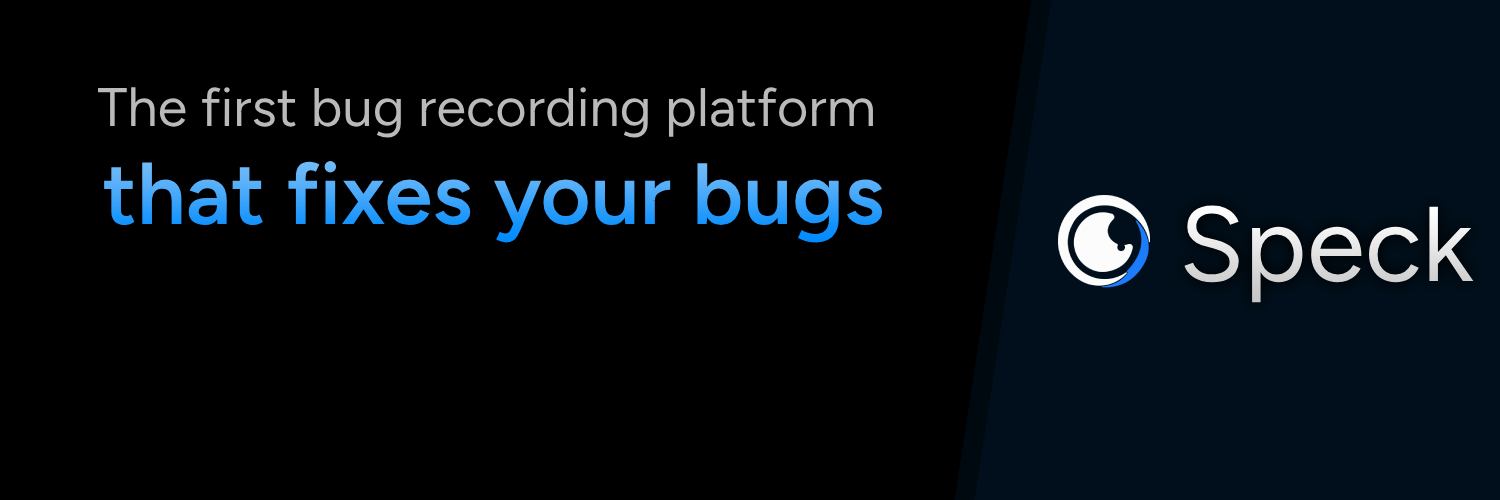
<style>
.page{position:relative;width:1500px;height:500px;background:#000000}
.page>*{position:absolute;margin:0}
.t1{font:54.2px "Figtree-Regular";color:#bababa}
.t2{font:86.7px "Figtree-SemiBold"}
.t3{font:106px "Figtree-Regular";color:#e4e4e4}
</style>
<div class="page">
<p class="t1" style="left:98px;top:87px;width:775px;height:51px">The first bug recording platform</p>
<p class="t2" style="left:104px;top:161px;width:778px;height:82px">that fixes your bugs</p>
<p class="t3" style="left:1184px;top:205px;width:290px;height:98px">Speck</p>
</div>
